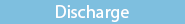
<style>
.page{position:relative;width:185px;height:24px;background:#7ebfdf}
.page>*{position:absolute;margin:0}
.t1{font:18px "MyriadPro-Regular";color:#ffffff}
</style>
<div class="page">
<p class="t1" style="left:56px;top:5px;width:73px;height:17px">Discharge</p>
</div>
